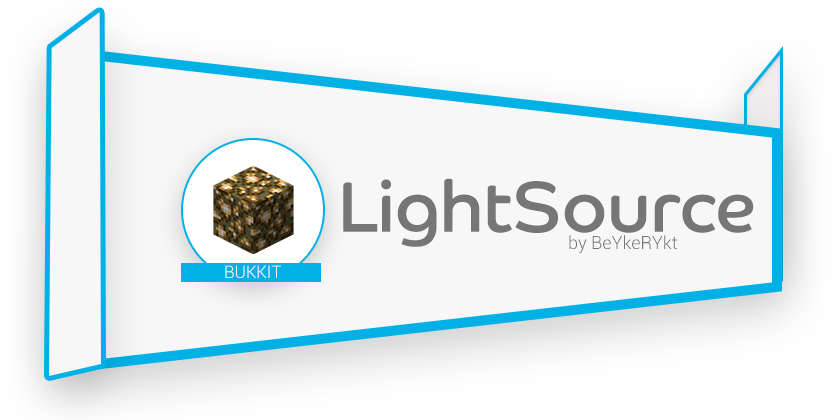
<style>
.page{position:relative;width:840px;height:420px;background:#f7f7f7}
.page>*{position:absolute;margin:0}
.t1{font:72px "CoHeadlineCorp-Regular";color:#767676}
.t2{font:18px "Roboto-Light";color:#767676}
.t3{font:17px "Roboto-Light";color:#f8f8f8}
</style>
<div class="page">
<p class="t1" style="left:343px;top:178px;width:411px;height:69px">LightSource</p>
<p class="t2" style="left:569px;top:235px;width:108px;height:18px">by BeYkeRYkt</p>
<p class="t3" style="left:225px;top:265px;width:56px;height:13px">BUKKIT</p>
</div>
